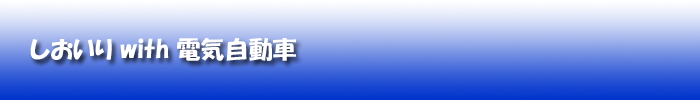
<style>
.page{position:relative;width:700px;height:100px}
.page>*{position:absolute;margin:0}
.t1{font:24px "HGPSoeiKakupoptai";color:#ffffff}
</style>
<div class="page">
<p class="t1" style="left:30px;top:37px;width:266px;height:24px">しおいり with 電気自動車</p>
</div>
